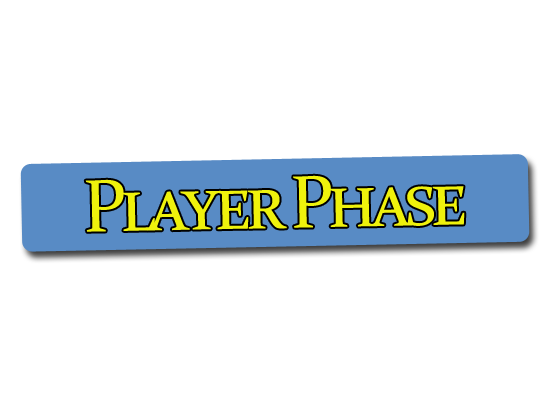
<style>
.page{position:relative;width:544px;height:416px;background:#ffffff}
.page>*{position:absolute;margin:0}
.t1{font:75px "Constantia";letter-spacing:-0.1em;color:#eff20c;font-variant:small-caps}
</style>
<div class="page">
<p class="t1" style="left:85px;top:175px;width:380px;height:57px;rotate:-1deg">Player Phase</p>
</div>
